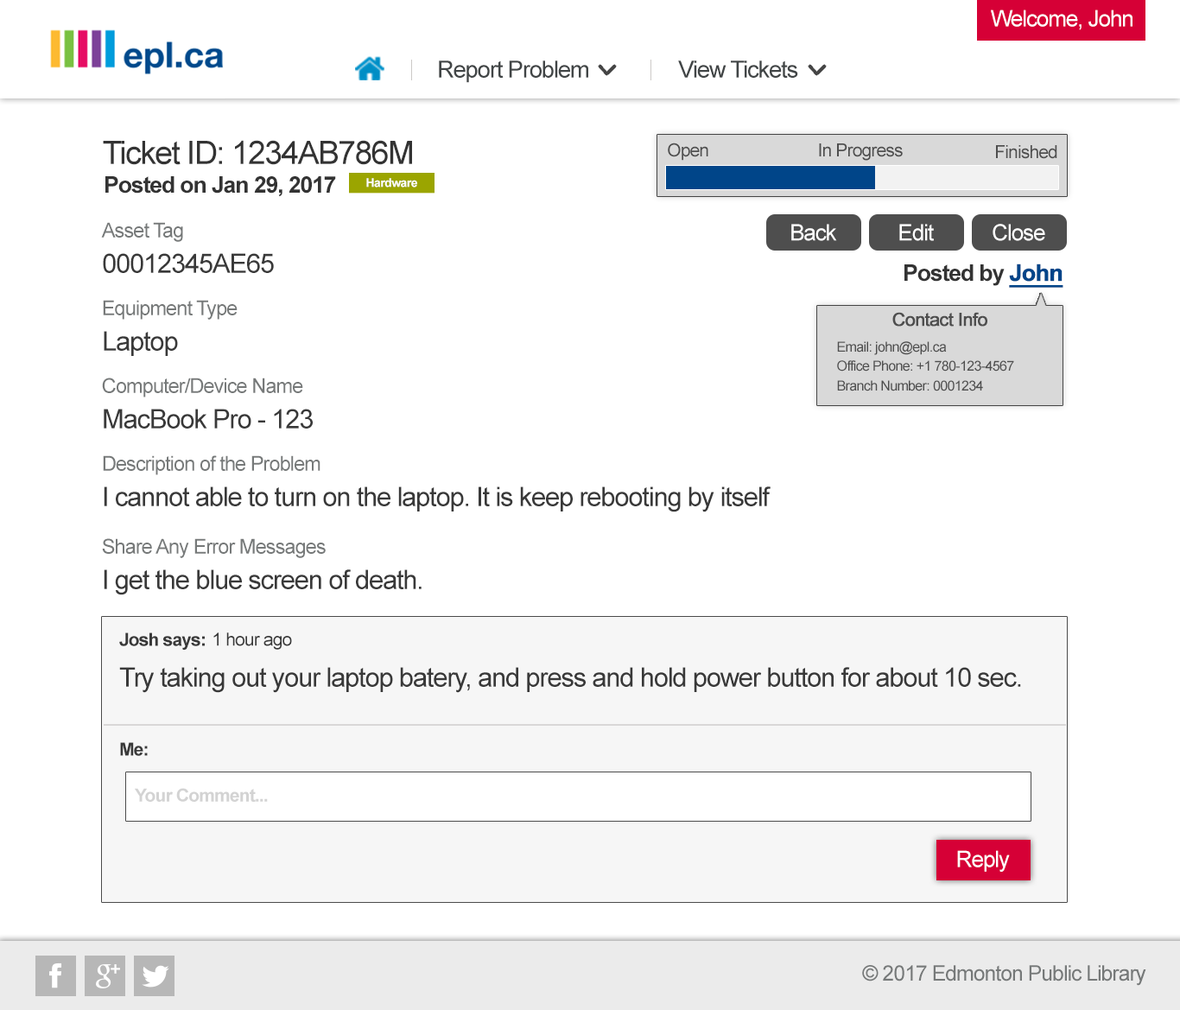
<style>
.page{position:relative;width:1180px;height:1010px;background:#ffffff}
.page>*{position:absolute;margin:0}
.t1{font:22.4px "ArialMT";letter-spacing:-0.04em;color:#ffffff}
.t2{font:23.6px "ArialMT";letter-spacing:-0.04em;color:#414546}
.t3{font:32.1px "ArialMT";letter-spacing:-0.04em;color:#333333}
.t4{font:18.1px "ArialMT";letter-spacing:-0.04em;color:#4e4e4e}
.t5{font:22.9px "Arial-BoldMT";letter-spacing:-0.04em;color:#333333}
.t6{font:12.1px "Arial-BoldMT";letter-spacing:-0.04em;color:#ffffff}
.t7{font:20.4px "ArialMT";letter-spacing:-0.04em;color:#767979}
.t8{font:22.5px "ArialMT";letter-spacing:-0.04em;color:#ffffff}
.t9{font:26.8px "ArialMT";letter-spacing:-0.04em;color:#393939}
.t10{font:22.9px "Arial-BoldMT";letter-spacing:-0.04em;color:#004589;font-weight:bold;text-decoration:underline}
.t11{font:18.1px "ArialMT";letter-spacing:-0.04em;color:#4e4e4e;font-weight:bold}
.t12{font:13.8px "ArialMT";letter-spacing:-0.04em;color:#4e4e4e}
.t13{font:18.1px "Arial-BoldMT";letter-spacing:-0.04em;color:#393939}
.t14{font:18.1px "ArialMT";letter-spacing:-0.04em;color:#393939}
.t15{font:18.1px "Arial-BoldMT";letter-spacing:-0.04em;color:#d3d3d3}
.t16{font:21.4px "ArialMT";letter-spacing:-0.04em;color:#767979}
</style>
<div class="page">
<p class="t1" style="left:991px;top:10px;width:142px;height:20px">Welcome, John</p>
<p class="t2" style="left:439px;top:60px;width:149px;height:23px">Report Problem</p>
<p class="t2" style="left:678px;top:60px;width:120px;height:18px">View Tickets</p>
<p class="t3" style="left:103px;top:140px;width:309px;height:25px">Ticket ID: 1234AB786M</p>
<p class="t4" style="left:668px;top:143px;width:41px;height:18px">Open</p>
<p class="t4" style="left:819px;top:143px;width:84px;height:18px">In Progress</p>
<p class="t4" style="left:996px;top:145px;width:62px;height:14px">Finished</p>
<p class="t5" style="left:105px;top:176px;width:231px;height:21px">Posted on Jan 29, 2017</p>
<p class="t6" style="left:366px;top:178px;width:51px;height:10px">Hardware</p>
<p class="t7" style="left:101px;top:222px;width:82px;height:20px">Asset Tag</p>
<p class="t8" style="left:792px;top:224px;width:45px;height:17px">Back</p>
<p class="t8" style="left:900px;top:224px;width:34px;height:17px">Edit</p>
<p class="t8" style="left:993px;top:224px;width:53px;height:17px">Close</p>
<p class="t9" style="left:103px;top:253px;width:171px;height:20px">00012345AE65</p>
<p class="t5" style="left:905px;top:264px;width:159px;height:24px">Posted by <span class="t10">John</span></p>
<p class="t7" style="left:103px;top:300px;width:135px;height:20px">Equipment Type</p>
<p class="t11" style="left:893px;top:312px;width:95px;height:15px">Contact Info</p>
<p class="t9" style="left:104px;top:331px;width:74px;height:25px">Laptop</p>
<p class="t12" style="left:837px;top:341px;width:110px;height:14px">Email: john@epl.ca</p>
<p class="t12" style="left:837px;top:360px;width:178px;height:12px">Office Phone: +1 780-123-4567</p>
<p class="t7" style="left:102px;top:378px;width:201px;height:20px">Computer/Device Name</p>
<p class="t12" style="left:837px;top:380px;width:146px;height:11px">Branch Number: 0001234</p>
<p class="t9" style="left:104px;top:409px;width:209px;height:20px">MacBook Pro - 123</p>
<p class="t7" style="left:103px;top:455px;width:218px;height:20px">Description of the Problem</p>
<p class="t9" style="left:104px;top:487px;width:667px;height:25px">I cannot able to turn on the laptop. It is keep rebooting by itself</p>
<p class="t7" style="left:102px;top:538px;width:224px;height:20px">Share Any Error Messages</p>
<p class="t9" style="left:104px;top:569px;width:318px;height:26px">I get the blue screen of death.</p>
<p class="t13" style="left:119px;top:633px;width:86px;height:17px">Josh says:</p>
<p class="t14" style="left:213px;top:633px;width:79px;height:17px">1 hour ago</p>
<p class="t9" style="left:119px;top:667px;width:902px;height:26px">Try taking out your laptop batery, and press and hold power button for about 10 sec.</p>
<p class="t13" style="left:120px;top:742px;width:28px;height:14px">Me:</p>
<p class="t15" style="left:135px;top:788px;width:133px;height:14px">Your Comment...</p>
<p class="t1" style="left:957px;top:850px;width:53px;height:22px">Reply</p>
<p class="t16" style="left:862px;top:965px;width:285px;height:21px">© 2017 Edmonton Public Library</p>
</div>
